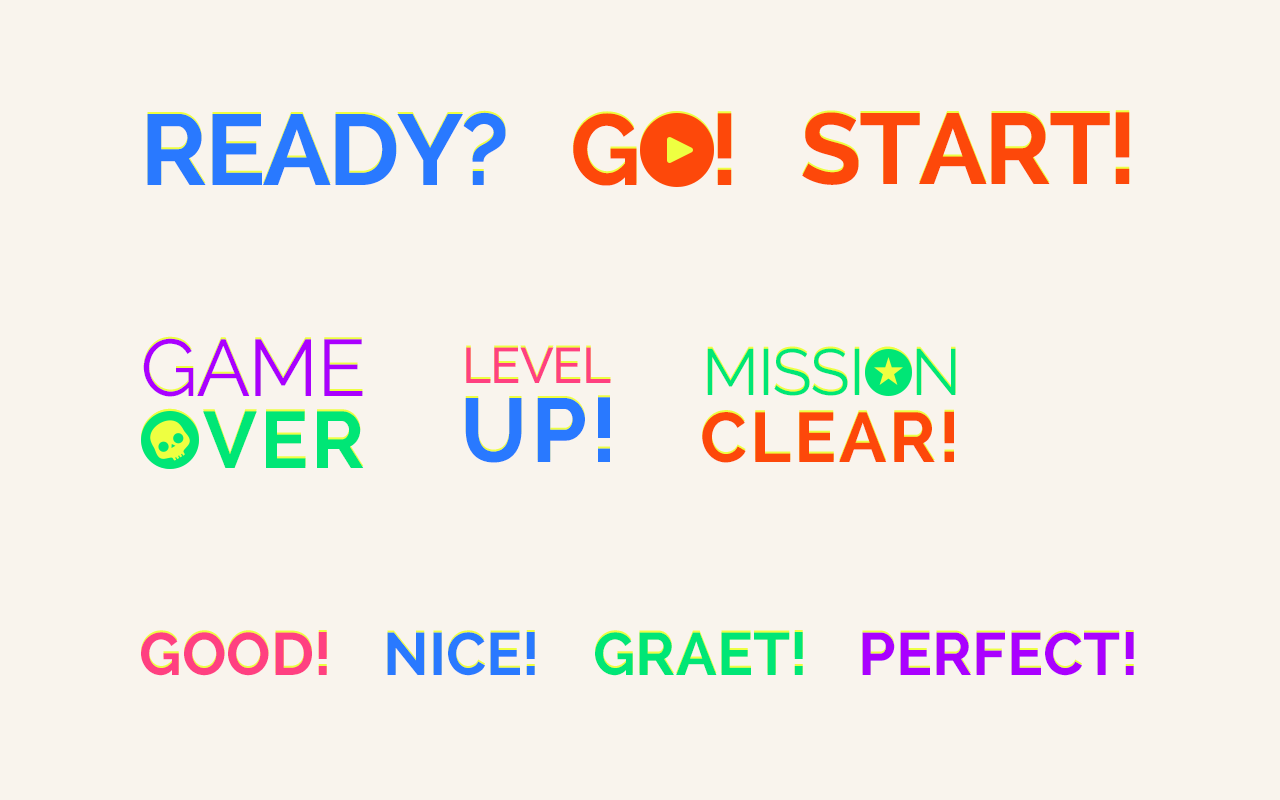
<style>
.page{position:relative;width:1280px;height:800px;background:#f9f4ed}
.page>*{position:absolute;margin:0}
.t1{font:100px "Raleway-Bold";letter-spacing:-0.025em;color:#2979ff;text-transform:uppercase}
.t2{font:100px "Raleway-Bold";letter-spacing:-0.025em;color:#fd480a;text-transform:uppercase}
.t3{font:80px "Raleway-Regular";letter-spacing:-0.025em;color:#aa00ff;text-transform:uppercase}
.t4{font:50px "Raleway-Medium";letter-spacing:-0.025em;color:#ff4081;text-transform:uppercase}
.t5{font:65px "Raleway-Regular";letter-spacing:-0.025em;color:#00e676;text-transform:uppercase}
.t6{font:90px "Raleway-Bold";letter-spacing:0.04em;color:#2979ff;text-transform:uppercase}
.t7{font:80px "Raleway-Bold";letter-spacing:0.04em;color:#00e676;text-transform:uppercase}
.t8{font:70px "Raleway-Bold";letter-spacing:0.04em;color:#fd480a;text-transform:uppercase}
.t9{font:60px "Raleway-Bold";color:#ff4081;text-transform:uppercase}
.t10{font:60px "Raleway-Bold";color:#2979ff;text-transform:uppercase}
.t11{font:60px "Raleway-Bold";color:#00e676;text-transform:uppercase}
.t12{font:60px "Raleway-Bold";color:#aa00ff;text-transform:uppercase}
</style>
<div class="page">
<p class="t1" style="left:147px;top:112px;width:359px;height:73px">ready?</p>
<p class="t2" style="left:573px;top:113px;width:159px;height:73px">GO!</p>
<p class="t2" style="left:802px;top:112px;width:328px;height:73px">Start!</p>
<p class="t3" style="left:143px;top:338px;width:220px;height:59px">GAME</p>
<p class="t4" style="left:466px;top:347px;width:145px;height:36px">LEVEL</p>
<p class="t5" style="left:707px;top:348px;width:249px;height:48px">mission</p>
<p class="t6" style="left:465px;top:397px;width:145px;height:66px">UP!</p>
<p class="t7" style="left:142px;top:410px;width:222px;height:59px">OVER</p>
<p class="t8" style="left:702px;top:411px;width:252px;height:52px">clear!</p>
<p class="t9" style="left:141px;top:632px;width:186px;height:44px">GOOD!</p>
<p class="t10" style="left:387px;top:632px;width:148px;height:44px">Nice!</p>
<p class="t11" style="left:595px;top:632px;width:208px;height:44px">graet!</p>
<p class="t12" style="left:862px;top:632px;width:272px;height:44px">perfect!</p>
</div>
